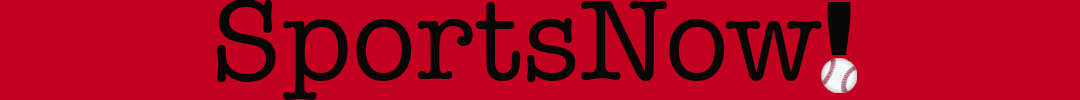
<style>
.page{position:relative;width:1080px;height:100px;background:#c30020}
.page>*{position:absolute;margin:0}
.t1{font:116.7px "AmericanTypewriter";color:#070707}
.t2{font:108.3px "Arial-Black";color:#070707}
</style>
<div class="page">
<p class="t1" style="left:216px;top:0px;width:635px;height:100px">SportsNow<span class="t2">!</span></p>
</div>
